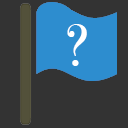
<style>
.page{position:relative;width:128px;height:128px;background:#333333}
.page>*{position:absolute;margin:0}
.t1{font:58.9px "BodoniSvtyTwoITCTT-Book";color:#ffffff}
</style>
<div class="page">
<p class="t1" style="left:67px;top:24px;width:20px;height:42px">?</p>
</div>
